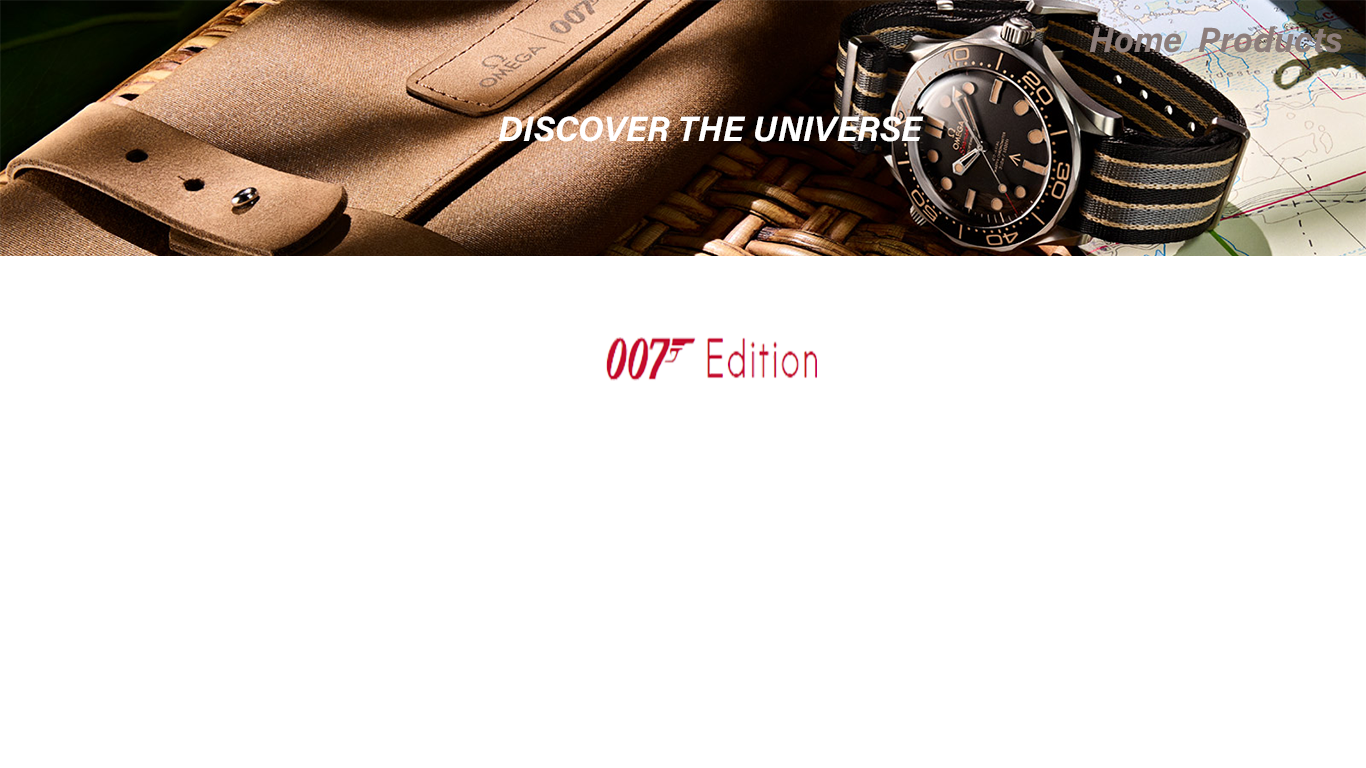
<style>
.page{position:relative;width:1366px;height:768px;background:#ffffff}
.page>*{position:absolute;margin:0}
.t1{font:35px "AcuminConcept-BoldItalic";color:#8c7d7a}
.t2{font:35px "AcuminConcept-BoldItalic";color:#ffffff}
</style>
<div class="page">
<p class="t1" style="left:1198px;top:26px;width:144px;height:27px">Products</p>
<p class="t2" style="left:498px;top:116px;width:426px;height:26px">DISCOVER THE UNIVERSE</p>
</div>
